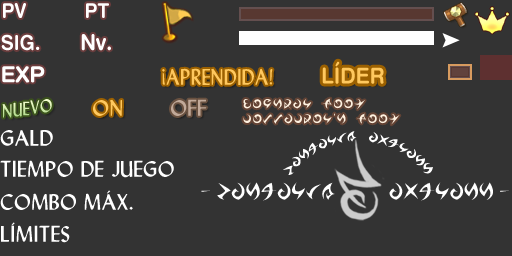
<style>
.page{position:relative;width:512px;height:256px;background:#333333}
.page>*{position:absolute;margin:0}
.t1{font:20.1px "Swiss721BT-BoldRounded";color:#ffffff;scale:0.97 1}
.t2{font:22px "Swiss721BT-BoldRounded";color:#ffffff;scale:0.97 1}
.t3{font:22px "Swiss721BT-BoldRounded";color:#ffc85e;scale:0.97 1}
.t4{font:24px "Lydian";color:#ffc85e;scale:0.92 1}
.t5{font:20.4px "Lydian";scale:0.88 1}
.t6{font:24px "Lydian";color:#ffc85e}
.t7{font:24px "Lydian";color:#c1a999}
.t8{font:24px "Lydian";color:#ffffff}
</style>
<div class="page">
<p class="t1" style="left:3px;top:3px;width:23px;height:15px">PV</p>
<p class="t1" style="left:86px;top:3px;width:23px;height:15px">PT</p>
<p class="t1" style="left:1px;top:34px;width:39px;height:17px">SIG.</p>
<p class="t2" style="left:81px;top:34px;width:30px;height:17px">Nv.</p>
<p class="t3" style="left:322px;top:61px;width:62px;height:23px">LÍDER</p>
<p class="t4" style="left:162px;top:68px;width:111px;height:17px">¡APRENDIDA!</p>
<p class="t5" style="left:2px;top:99px;width:50px;height:19px">NUEVO</p>
<p class="t6" style="left:93px;top:99px;width:29px;height:17px">ON</p>
<p class="t7" style="left:171px;top:99px;width:36px;height:17px">OFF</p>
<p class="t8" style="left:0px;top:130px;width:53px;height:16px">GALD</p>
<p class="t8" style="left:0px;top:160px;width:174px;height:18px">TIEMPO DE JUEGO</p>
<p class="t8" style="left:0px;top:190px;width:133px;height:20px">COMBO MÁX.</p>
<p class="t8" style="left:1px;top:222px;width:69px;height:21px">LÍMITES</p>
</div>
